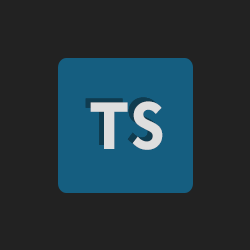
<style>
.page{position:relative;width:250px;height:250px;background:#222222}
.page>*{position:absolute;margin:0}
.t1{font:60px "Geometric212BT-HeavyCondensed";letter-spacing:0.005em;color:#dedede}
</style>
<div class="page">
<p class="t1" style="left:90px;top:101px;width:73px;height:49px">TS</p>
</div>
